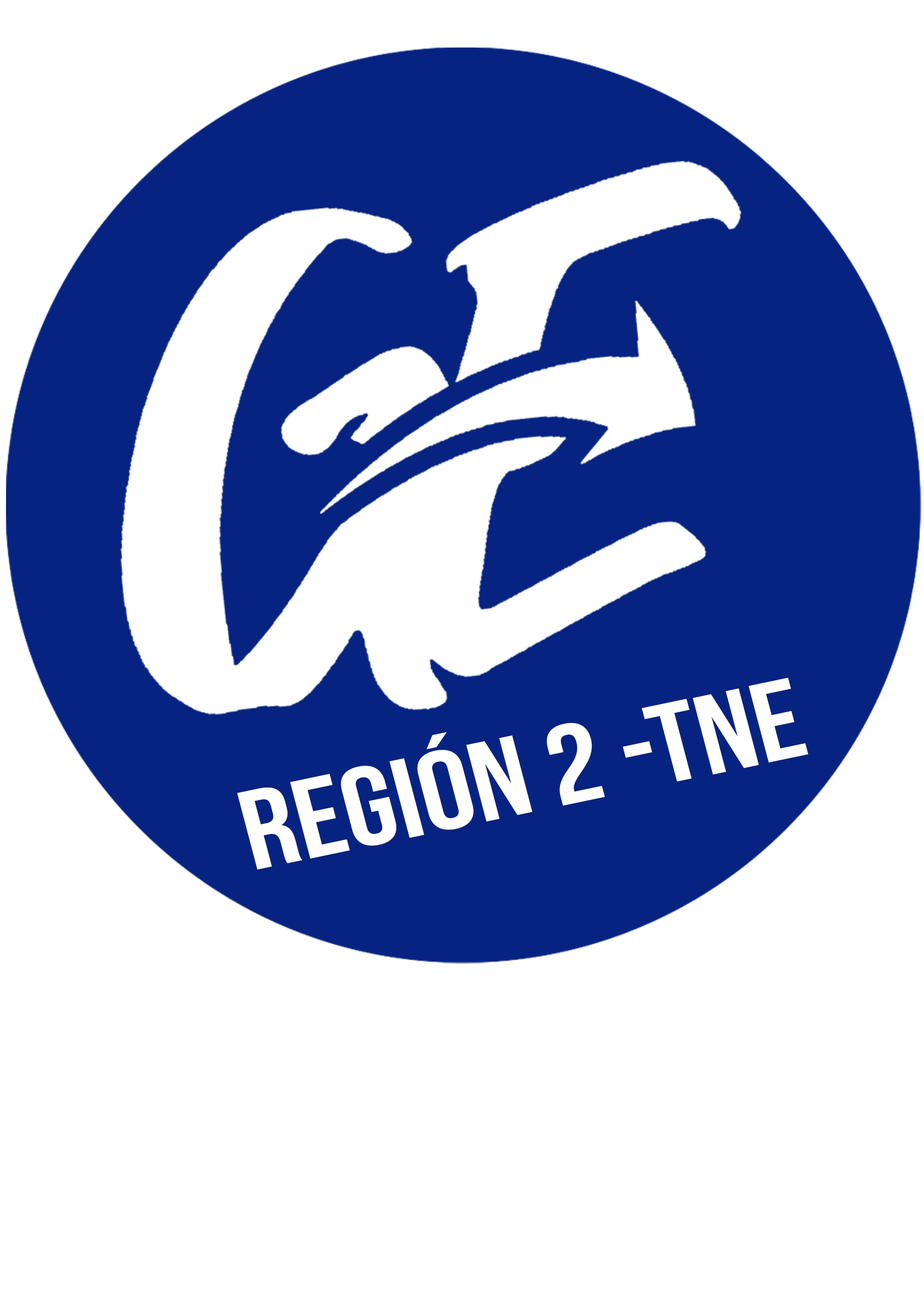
<style>
.page{position:relative;width:924px;height:1290px;background:#ffffff}
.page>*{position:absolute;margin:0}
.t1{font:112.8px "BebasNeueBold";color:#ffffff;scale:1.19 1}
</style>
<div class="page">
<p class="t1" style="left:237px;top:678px;width:572px;height:191px;rotate:-12deg">REGIÓN 2 -TNE</p>
</div>
